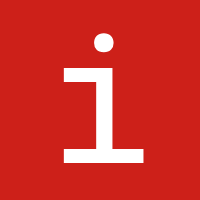
<style>
.page{position:relative;width:200px;height:200px;background:#cd2019}
.page>*{position:absolute;margin:0}
.t1{font:180px "RobotoMono-Regular";color:#ffffff}
</style>
<div class="page">
<p class="t1" style="left:63px;top:33px;width:81px;height:130px">i</p>
</div>
